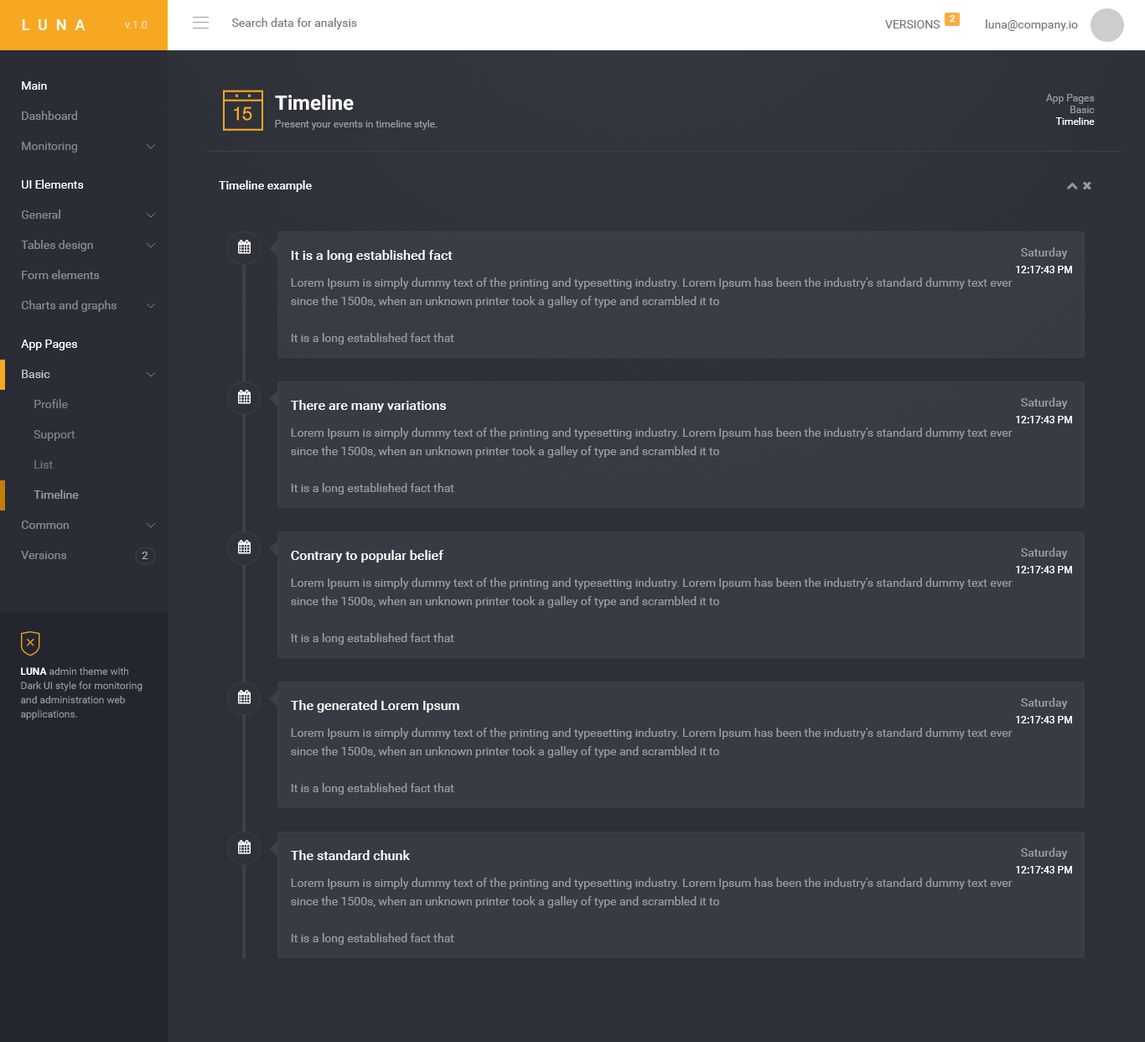
<style>
.page{position:relative;width:1145px;height:1042px;background:#393b44}
.page>*{position:absolute;margin:0}
.t1{font:11.7px "Roboto-Regular";color:#6f7780}
.t2{font:9.2px "Roboto-Bold";color:#ffffff}
.t3{font:15.1px "Roboto-Medium";letter-spacing:0.55em;color:#ffffff}
.t4{font:10.9px "Roboto-Regular";color:#fbdfbc}
.t5{font:11.7px "Roboto-Regular";color:#ffffff}
.t6{font:20.1px "Roboto-Bold";color:#ffffff}
.t7{font:10.1px/11.7px "Roboto-Regular";color:#949ba2}
.t8{font:10.1px/11.7px "Roboto-Regular";color:#ffffff}
.t9{font:11.7px "Roboto-Regular";color:#848c94}
.t10{font:10.1px "Roboto-Regular";color:#949ba2}
.t11{font:11.7px "Roboto-Regular";color:#7c858d}
.t12{font:11.7px "Roboto-Medium";color:#ffffff}
.t13{font:13.4px "Roboto-Medium";color:#ffffff}
.t14{font:10.1px/16.8px "Roboto-Medium";color:#ffffff}
.t15{font:11.7px/16.8px "Roboto-Medium";color:#949ba2}
.t16{font:11.7px/18.4px "Roboto-Regular";color:#949ba2}
.t17{font:11.7px "Roboto-Regular";color:#c0c4c8}
.t18{font:11.7px "Roboto-Regular";color:#7a828a}
.t19{font:11.7px "Roboto-Regular";color:#6c737b}
.t20{font:11.7px "Roboto-Regular";color:#99a2a0}
.t21{font:10.9px "Roboto-Regular";color:#aaacb5}
.t22{font:10.1px/14.2px "Roboto-Regular";color:#949ba2}
.t23{font:10.1px/14.2px "Roboto-Bold";color:#ffffff}
</style>
<div class="page">
<p class="t1" style="left:231px;top:18px;width:126px;height:11px">Search data for analysis</p>
<p class="t2" style="left:949px;top:15px;width:6px;height:7px">2</p>
<p class="t3" style="left:22px;top:19px;width:63px;height:11px">LUNA</p>
<p class="t4" style="left:124px;top:21px;width:23px;height:7px">v.1.0</p>
<p class="t1" style="left:885px;top:20px;width:55px;height:8px">VERSIONS</p>
<p class="t1" style="left:986px;top:19px;width:92px;height:12px">luna@company.io</p>
<p class="t5" style="left:22px;top:81px;width:25px;height:9px">Main</p>
<p class="t6" style="left:275px;top:95px;width:79px;height:16px">Timeline</p>
<p class="t7" style="left:1046px;top:94px;width:48px;height:31px;text-align:right">App Pages<br>Basic<br><span class="t8">Timeline</span></p>
<p class="t9" style="left:22px;top:111px;width:55px;height:9px">Dashboard</p>
<p class="t10" style="left:275px;top:120px;width:162px;height:10px">Present your events in timeline style.</p>
<p class="t11" style="left:22px;top:142px;width:55px;height:11px">Monitoring</p>
<p class="t5" style="left:22px;top:179px;width:62px;height:10px">UI Elements</p>
<p class="t12" style="left:219px;top:180px;width:93px;height:12px">Timeline example</p>
<p class="t9" style="left:22px;top:210px;width:38px;height:9px">General</p>
<p class="t9" style="left:21px;top:240px;width:72px;height:11px">Tables design</p>
<p class="t13" style="left:291px;top:250px;width:162px;height:12px">It is a long established fact</p>
<p class="t14" style="left:1016px;top:247px;width:56px;height:26px;text-align:center"><span class="t15">Saturday<br></span>12:17:43 PM</p>
<p class="t9" style="left:22px;top:270px;width:78px;height:9px">Form elements</p>
<p class="t16" style="left:291px;top:277px;width:721px;height:67px">Lorem Ipsum is simply dummy text of the printing and typesetting industry. Lorem Ipsum has been the industry's standard dummy text ever since the 1500s, when an unknown printer took a galley of type and scrambled it to<br><br>It is a long established fact that</p>
<p class="t9" style="left:21px;top:300px;width:95px;height:12px">Charts and graphs</p>
<p class="t5" style="left:21px;top:339px;width:56px;height:11px">App Pages</p>
<p class="t17" style="left:22px;top:370px;width:28px;height:8px">Basic</p>
<p class="t18" style="left:34px;top:399px;width:34px;height:9px">Profile</p>
<p class="t13" style="left:291px;top:400px;width:155px;height:12px">There are many variations</p>
<p class="t14" style="left:1016px;top:397px;width:56px;height:26px;text-align:center"><span class="t15">Saturday<br></span>12:17:43 PM</p>
<p class="t18" style="left:34px;top:430px;width:41px;height:11px">Support</p>
<p class="t16" style="left:291px;top:427px;width:721px;height:67px">Lorem Ipsum is simply dummy text of the printing and typesetting industry. Lorem Ipsum has been the industry's standard dummy text ever since the 1500s, when an unknown printer took a galley of type and scrambled it to<br><br>It is a long established fact that</p>
<p class="t19" style="left:34px;top:460px;width:19px;height:8px">List</p>
<p class="t20" style="left:34px;top:489px;width:45px;height:10px">Timeline</p>
<p class="t9" style="left:21px;top:520px;width:48px;height:9px">Common</p>
<p class="t9" style="left:21px;top:551px;width:46px;height:8px">Versions</p>
<p class="t21" style="left:142px;top:551px;width:6px;height:8px">2</p>
<p class="t13" style="left:291px;top:550px;width:152px;height:12px">Contrary to popular belief</p>
<p class="t14" style="left:1016px;top:547px;width:56px;height:26px;text-align:center"><span class="t15">Saturday<br></span>12:17:43 PM</p>
<p class="t16" style="left:291px;top:577px;width:721px;height:67px">Lorem Ipsum is simply dummy text of the printing and typesetting industry. Lorem Ipsum has been the industry's standard dummy text ever since the 1500s, when an unknown printer took a galley of type and scrambled it to<br><br>It is a long established fact that</p>
<p class="t22" style="left:21px;top:667px;width:121px;height:53px"><span class="t23">LUNA </span>admin theme with Dark UI style for monitoring and administration web applications.</p>
<p class="t13" style="left:291px;top:700px;width:168px;height:12px">The generated Lorem Ipsum</p>
<p class="t14" style="left:1016px;top:697px;width:56px;height:26px;text-align:center"><span class="t15">Saturday<br></span>12:17:43 PM</p>
<p class="t16" style="left:291px;top:727px;width:721px;height:67px">Lorem Ipsum is simply dummy text of the printing and typesetting industry. Lorem Ipsum has been the industry's standard dummy text ever since the 1500s, when an unknown printer took a galley of type and scrambled it to<br><br>It is a long established fact that</p>
<p class="t13" style="left:291px;top:850px;width:119px;height:10px">The standard chunk</p>
<p class="t14" style="left:1016px;top:847px;width:56px;height:26px;text-align:center"><span class="t15">Saturday<br></span>12:17:43 PM</p>
<p class="t16" style="left:291px;top:877px;width:721px;height:67px">Lorem Ipsum is simply dummy text of the printing and typesetting industry. Lorem Ipsum has been the industry's standard dummy text ever since the 1500s, when an unknown printer took a galley of type and scrambled it to<br><br>It is a long established fact that</p>
</div>
